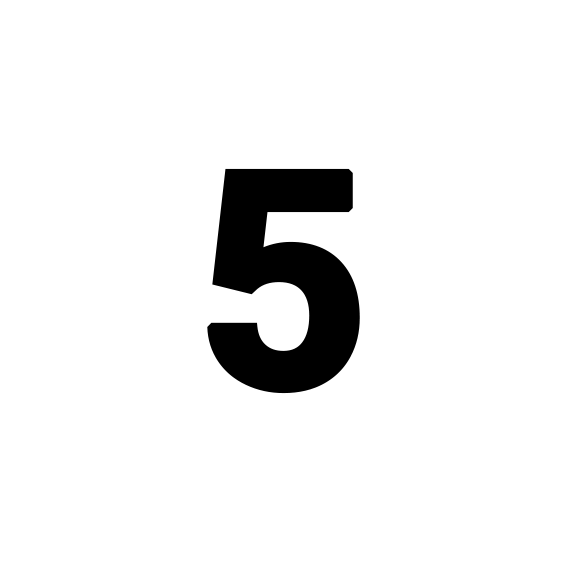
<style>
.page{position:relative;width:561px;height:561px;background:#ffffff}
.page>*{position:absolute;margin:0}
.t1{font:300px "Roboto-Bold";color:#000000;font-weight:bold}
</style>
<div class="page">
<p class="t1" style="left:207px;top:168px;width:153px;height:226px">5</p>
</div>
